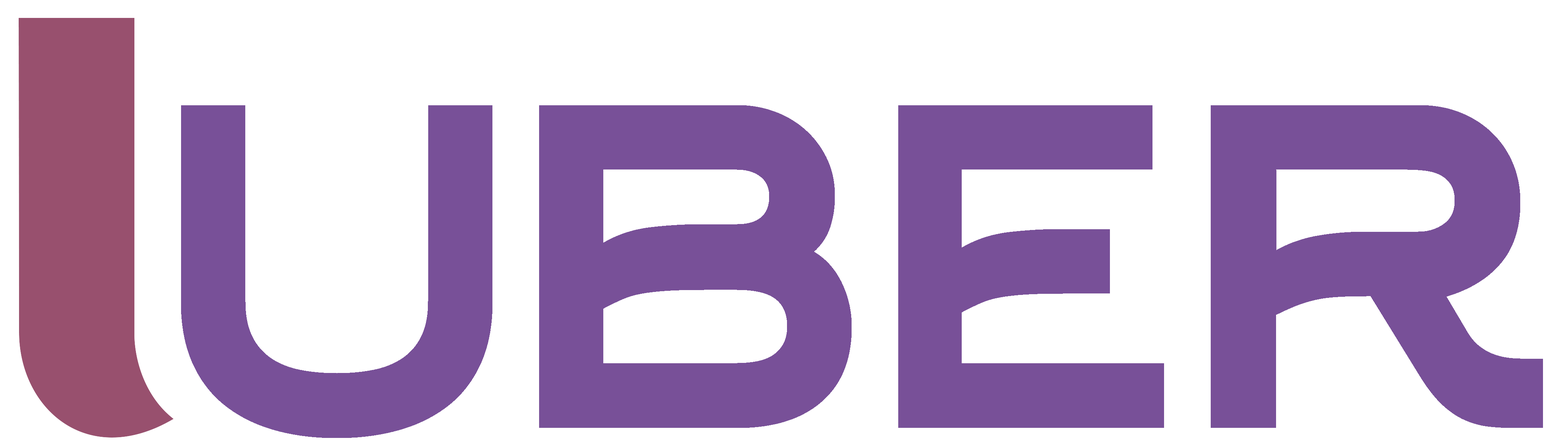
<style>
.page{position:relative;width:1568px;height:448px;background:#ffffff}
.page>*{position:absolute;margin:0}
.t1{font:622.2px "Arkhip";color:#785098}
</style>
<div class="page">
<p class="t1" style="left:181px;top:105px;width:311px;height:333px">u</p>
<p class="t1" style="left:539px;top:105px;width:313px;height:323px">b</p>
<p class="t1" style="left:898px;top:105px;width:266px;height:323px">e</p>
<p class="t1" style="left:1211px;top:105px;width:332px;height:323px">r</p>
</div>
